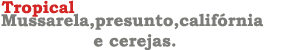
<style>
.page{position:relative;width:300px;height:50px;background:#ffffff}
.page>*{position:absolute;margin:0}
.t1{font:17px "BookmanOldStyle-Bold";color:#d42525}
.t2{font:17px "BookmanOldStyle-Bold";color:#7c7c79}
</style>
<div class="page">
<p class="t1" style="left:1px;top:0px;width:74px;height:17px">Tropical</p>
<p class="t2" style="left:1px;top:13px;width:262px;height:38px;text-align:center">Mussarela,presunto,califórnia <br>e cerejas.</p>
</div>
